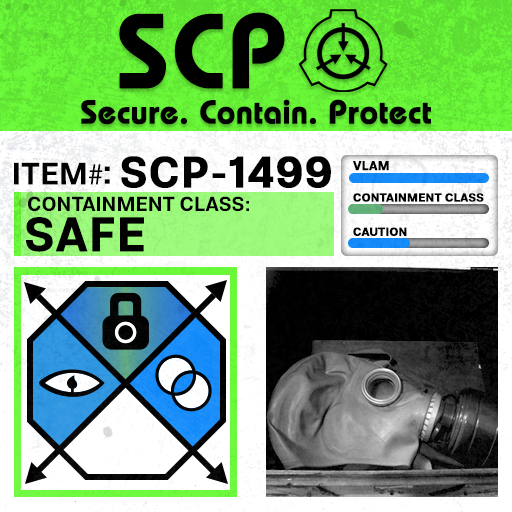
<style>
.page{position:relative;width:512px;height:512px}
.page>*{position:absolute;margin:0}
.t1{font:105.8px "BauhausLT-Demi";color:#000000;font-weight:bold}
.t2{font:33px "BauhausLT-Demi";color:#000000;font-weight:bold}
.t3{font:43.7px "Molde-Semibold";color:#000000;font-weight:bold}
.t4{font:12.5px "Molde-Semibold";color:#000000;font-weight:bold}
.t5{font:31.1px "Molde-Semibold";color:#000000}
.t6{font:31.1px "MyriadPro-Regular";color:#000000}
.t7{font:34.5px "Molde-Semibold";color:#000000}
.t8{font:20.3px "Molde-Semibold";color:#000000}
.t9{font:11.7px "Molde-Semibold";color:#000000;font-weight:bold}
.t10{font:47.8px "Molde-Semibold";color:#000000;font-weight:bold}
</style>
<div class="page">
<p class="t1" style="left:119px;top:12px;width:166px;height:77px">SCP</p>
<p class="t2" style="left:81px;top:99px;width:350px;height:26px">Secure. Contain. Protect</p>
<p class="t3" style="left:121px;top:156px;width:210px;height:32px">SCP-1499</p>
<p class="t4" style="left:353px;top:161px;width:36px;height:10px">VLAM</p>
<p class="t5" style="left:14px;top:162px;width:89px;height:23px">ITEM<span class="t6">#</span></p>
<p class="t7" style="left:104px;top:166px;width:6px;height:18px">:</p>
<p class="t8" style="left:28px;top:196px;width:221px;height:16px">CONTAINMENT CLASS:</p>
<p class="t9" style="left:353px;top:193px;width:131px;height:9px">CONTAINMENT CLASS</p>
<p class="t10" style="left:26px;top:217px;width:118px;height:35px">SAFE</p>
<p class="t9" style="left:353px;top:227px;width:54px;height:9px">CAUTION</p>
</div>
